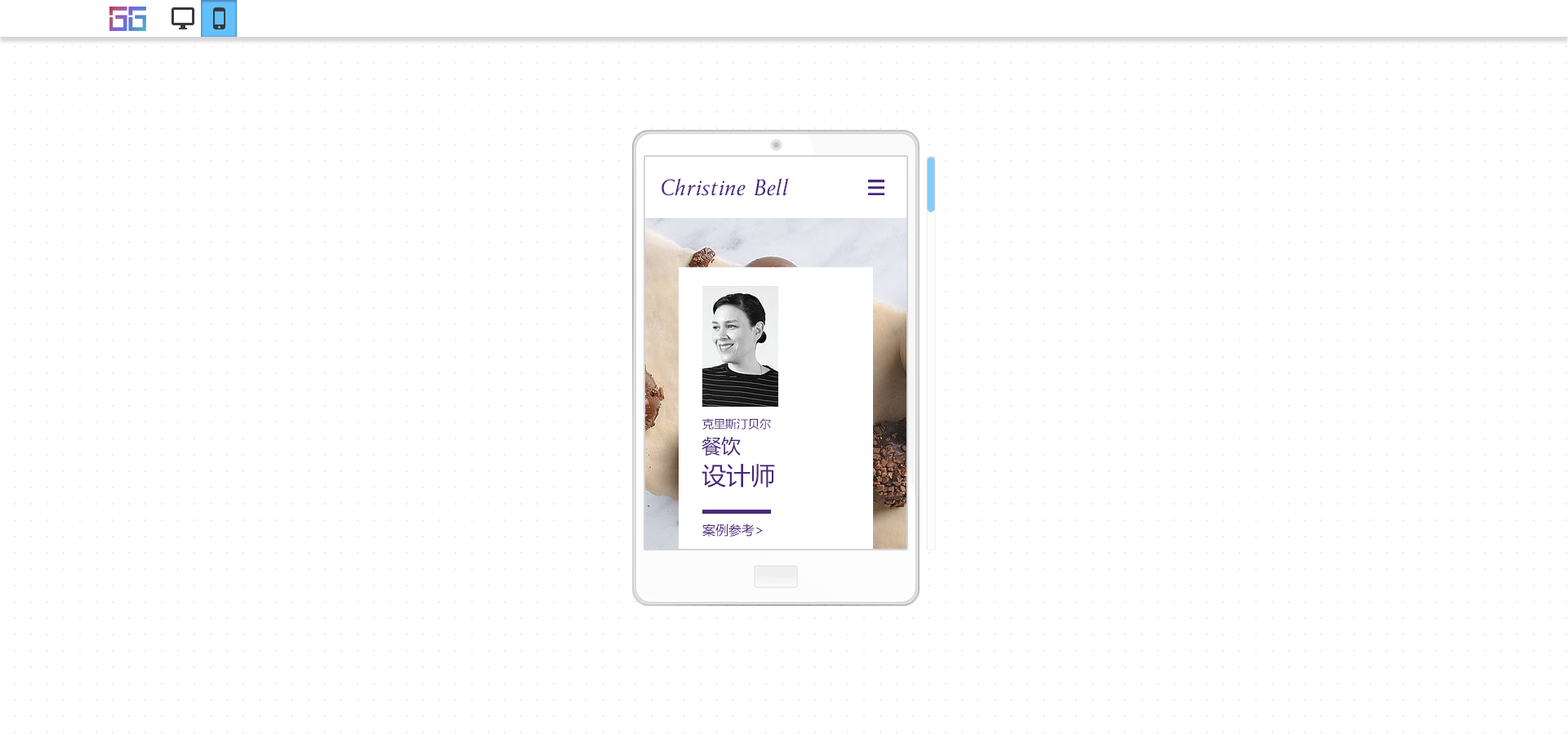
<style>
.page{position:relative;width:1568px;height:735px;background:#ffffff}
.page>*{position:absolute;margin:0}
.t1{font:24.5px "Anziano-Italic";color:#48277c}
.t2{font:11.4px "MicrosoftYaHei";color:#48277c}
.t3{font:19.6px "MicrosoftYaHei";color:#48277c}
.t4{font:24.5px "MicrosoftYaHei";color:#48277c}
.t5{font:13.1px "MicrosoftYaHei";color:#48277c}
</style>
<div class="page">
<p class="t1" style="left:662px;top:178px;width:127px;height:18px">Christine Bell</p>
<p class="t2" style="left:702px;top:418px;width:69px;height:12px">克里斯汀贝尔</p>
<p class="t3" style="left:702px;top:436px;width:39px;height:20px">餐饮</p>
<p class="t4" style="left:702px;top:464px;width:73px;height:24px">设计师</p>
<p class="t5" style="left:702px;top:523px;width:61px;height:14px">案例参考&gt;</p>
</div>
